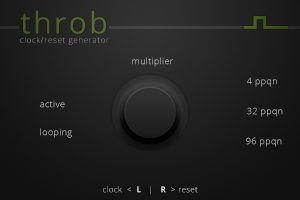
<style>
.page{position:relative;width:300px;height:200px}
.page>*{position:absolute;margin:0}
.t1{font:30px "OpenSans";letter-spacing:0.08em;color:#4d6129}
.t2{font:8px "OpenSans-Light";letter-spacing:0.08em}
.t3{font:9px "OpenSans-Light";letter-spacing:0.04em}
.t4{font:8px "OpenSans-Light";letter-spacing:0.04em;color:#d5d6d5}
.t5{font:8px "OpenSans-Bold";letter-spacing:0.04em;color:#d5d6d5}
</style>
<div class="page">
<p class="t1" style="left:20px;top:10px;width:86px;height:24px">throb</p>
<p class="t2" style="left:20px;top:36px;width:89px;height:9px">clock/reset generator</p>
<p class="t3" style="left:132px;top:57px;width:41px;height:10px">multiplier</p>
<p class="t3" style="left:247px;top:77px;width:30px;height:10px">4 ppqn</p>
<p class="t3" style="left:40px;top:100px;width:25px;height:8px">active</p>
<p class="t3" style="left:247px;top:107px;width:36px;height:10px">32 ppqn</p>
<p class="t3" style="left:40px;top:128px;width:32px;height:10px">looping</p>
<p class="t3" style="left:246px;top:137px;width:36px;height:10px">96 ppqn</p>
<p class="t4" style="left:103px;top:186px;width:95px;height:9px">clock  &lt;  <span class="t5">L   </span>|   <span class="t5">R  </span>&gt; reset</p>
</div>
